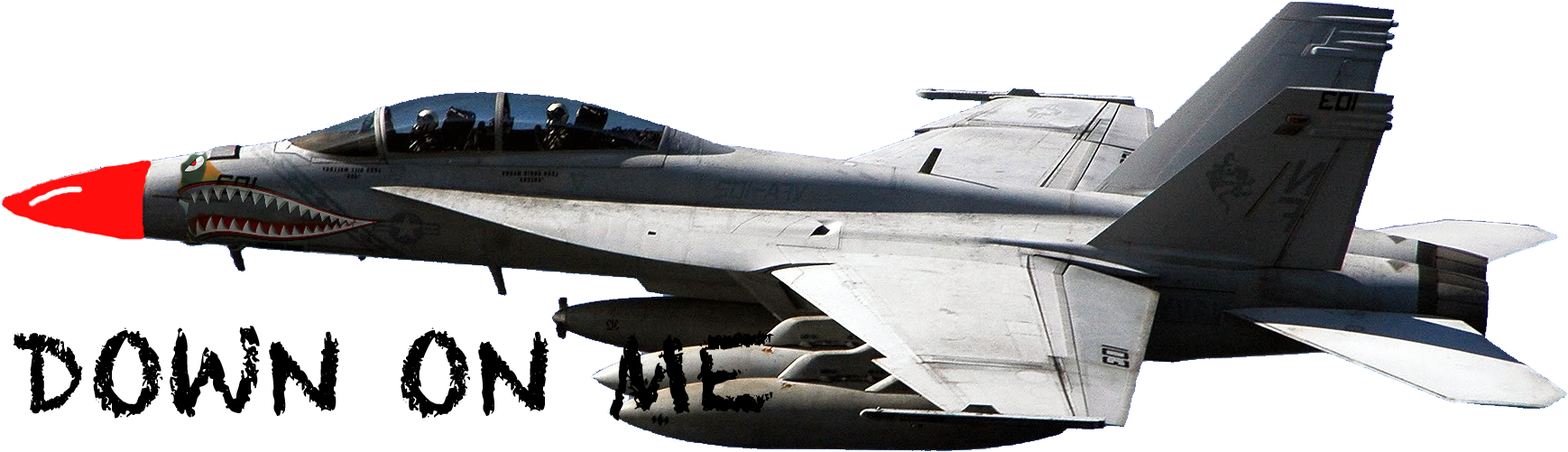
<style>
.page{position:relative;width:1568px;height:452px;background:#ffffff}
.page>*{position:absolute;margin:0}
.t1{font:108.3px "Chalkduster";color:#000000}
</style>
<div class="page">
<p class="t1" style="left:13px;top:326px;width:761px;height:95px">DOWN ON ME</p>
</div>
